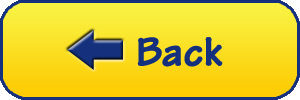
<style>
.page{position:relative;width:300px;height:100px}
.page>*{position:absolute;margin:0}
.t1{font:41.7px "TektonPro-Bold";color:#15317e;font-weight:bold}
</style>
<div class="page">
<p class="t1" style="left:137px;top:37px;width:86px;height:30px">Back</p>
</div>
